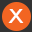
<style>
.page{position:relative;width:32px;height:32px;background:#f26522}
.page>*{position:absolute;margin:0}
.t1{font:30px "Futura-Book";color:#fefefe}
</style>
<div class="page">
<p class="t1" style="left:8px;top:9px;width:16px;height:14px">x</p>
</div>
